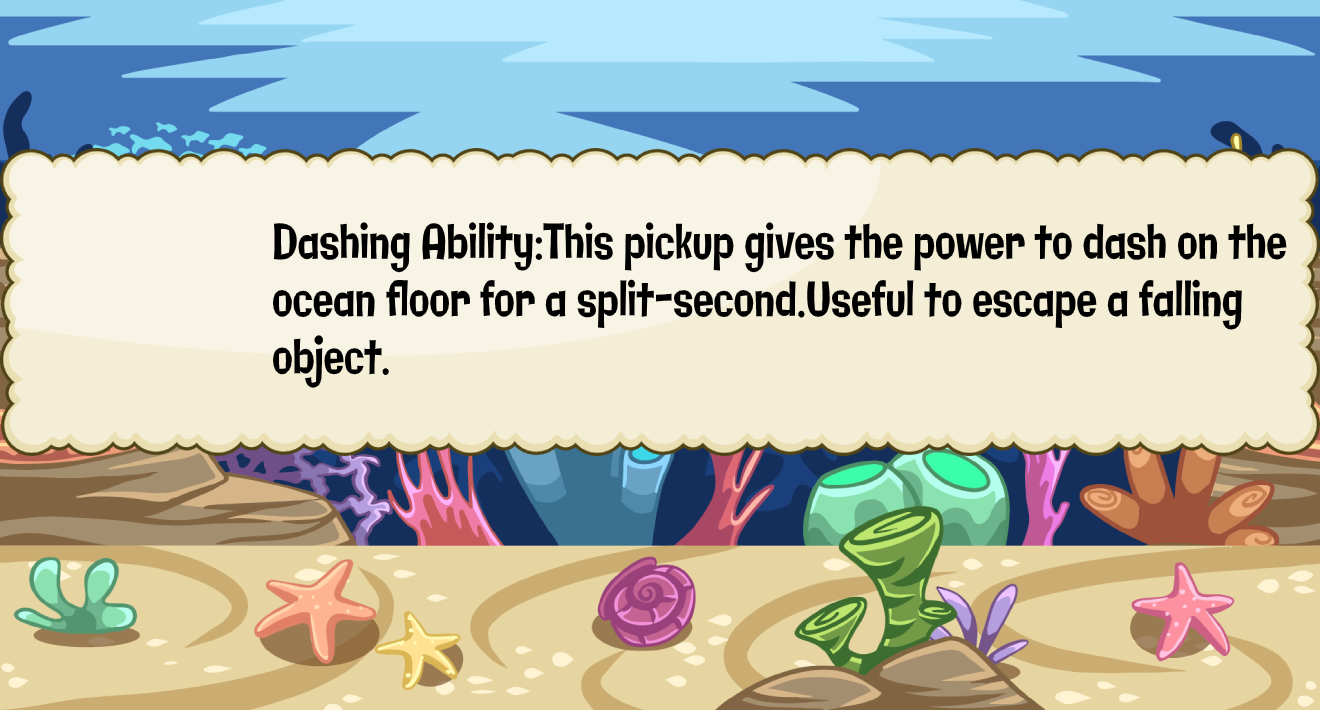
<style>
.page{position:relative;width:1320px;height:710px;background:#f4eed7}
.page>*{position:absolute;margin:0}
.t1{font:47.9px "Galindo-Regular";color:#000000;scale:0.71 1}
</style>
<div class="page">
<p class="t1" style="left:273px;top:222px;width:1014px;height:166px">Dashing Ability:This pickup gives the power to dash on the <br>ocean floor for a split-second.Useful to escape a falling <br>object.</p>
</div>
